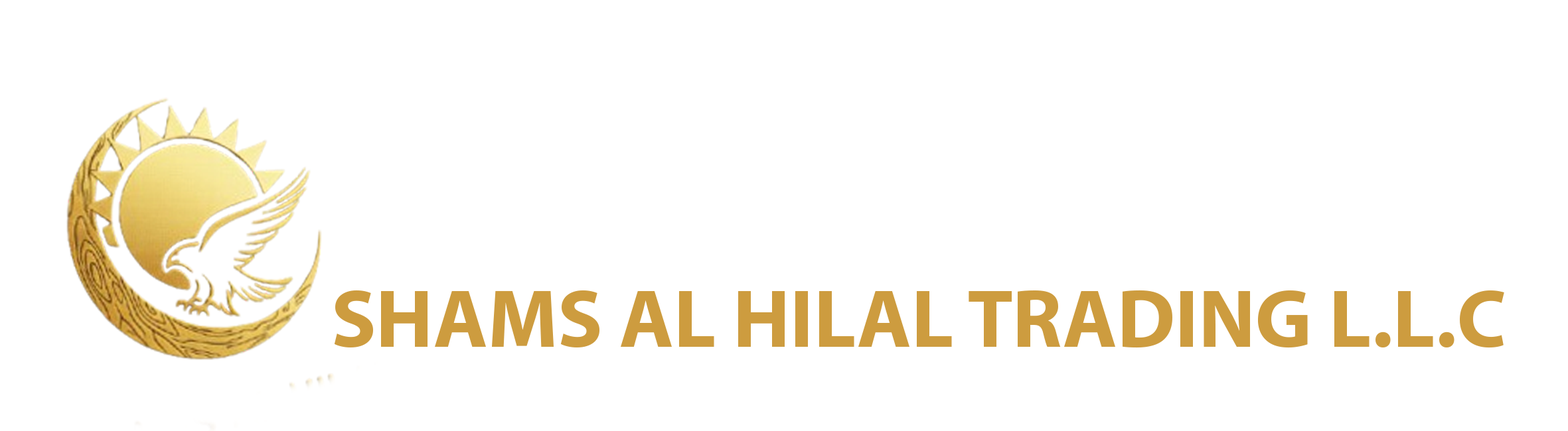
<style>
.page{position:relative;width:1568px;height:431px;background:#ffffff}
.page>*{position:absolute;margin:0}
.t1{font:83px "MyriadPro-Bold";color:#cd9c3f}
</style>
<div class="page">
<p class="t1" style="left:334px;top:290px;width:1170px;height:59px">SHAMS AL HILAL TRADING L.L.C</p>
</div>
